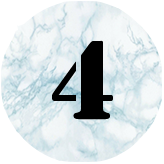
<style>
.page{position:relative;width:164px;height:164px;background:#ffffff}
.page>*{position:absolute;margin:0}
.t1{font:103.8px "StencilStd";color:#000000}
</style>
<div class="page">
<p class="t1" style="left:52px;top:40px;width:61px;height:80px">4</p>
</div>
